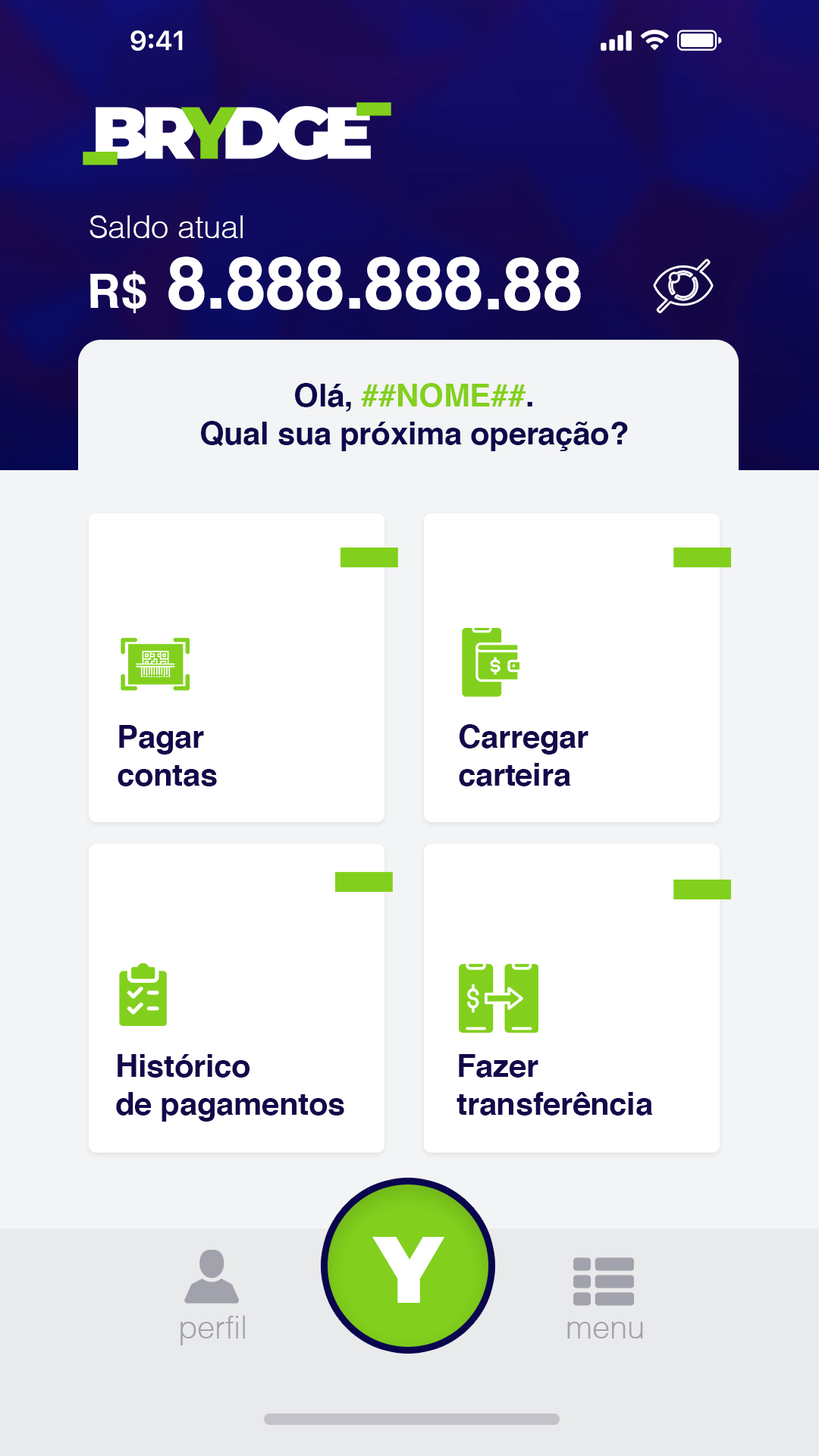
<style>
.page{position:relative;width:819px;height:1456px;background:#ffffff}
.page>*{position:absolute;margin:0}
.t1{font:31.9px "Helvetica-Light";letter-spacing:-0.01em;color:#fffefe}
.t2{font:72.9px "Helvetica-Bold";letter-spacing:-0.01em;color:#fffefe}
.t3{font:47.5px "Helvetica-Bold";letter-spacing:-0.01em;color:#fffefe}
.t4{font:31.9px "Helvetica-Bold";letter-spacing:-0.01em;color:#0f064b}
.t5{font:31.9px "Helvetica-Bold";letter-spacing:-0.01em;color:#82d01d}
.t6{font:31.9px "Helvetica-Bold";letter-spacing:-0.01em;color:#16074a}
.t7{font:94.6px "Montserrat-Black";color:#ffffff}
.t8{font:31.9px "Helvetica-Light";letter-spacing:-0.01em;color:#a2a2ad}
</style>
<div class="page">
<p class="t1" style="left:89px;top:215px;width:154px;height:23px">Saldo atual</p>
<p class="t2" style="left:90px;top:256px;width:491px;height:57px"><span class="t3">R$</span> 8.888.888.88</p>
<p class="t4" style="left:201px;top:383px;width:427px;height:68px;text-align:center">Olá, <span class="t5">##NOME##</span>.<br>Qual sua próxima operação?</p>
<p class="t6" style="left:118px;top:725px;width:99px;height:61px">Pagar<br>contas</p>
<p class="t6" style="left:459px;top:724px;width:129px;height:62px">Carregar<br>carteira</p>
<p class="t6" style="left:116px;top:1054px;width:228px;height:68px">Histórico<br>de pagamentos</p>
<p class="t6" style="left:457px;top:1054px;width:196px;height:61px">Fazer<br>transferência</p>
<p class="t7" style="left:372px;top:1237px;width:73px;height:66px">Y</p>
<p class="t8" style="left:180px;top:1316px;width:65px;height:29px">perfil</p>
<p class="t8" style="left:567px;top:1322px;width:76px;height:16px">menu</p>
</div>
